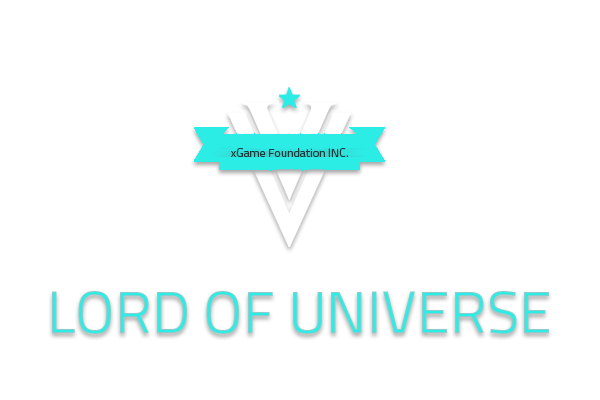
<style>
.page{position:relative;width:600px;height:400px;background:#ffffff}
.page>*{position:absolute;margin:0}
.t1{font:12px "Titillium-Regular";color:#103d3d}
.t2{font:60px "Titillium-Regular"}
</style>
<div class="page">
<p class="t1" style="left:231px;top:148px;width:117px;height:9px">xGame Foundation INC.</p>
<p class="t2" style="left:52px;top:291px;width:497px;height:43px">LORD OF UNIVERSE</p>
</div>
